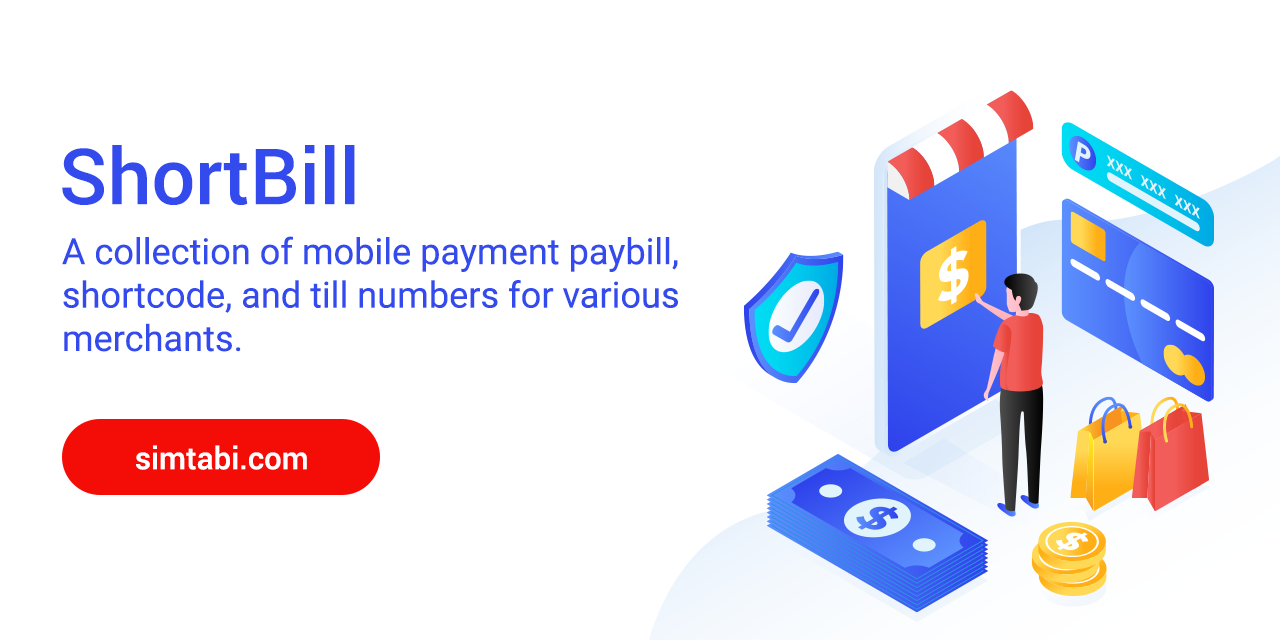
<style>
.page{position:relative;width:1280px;height:640px;background:#ffffff}
.page>*{position:absolute;margin:0}
.t1{font:77.5px "Roboto-Medium";color:#334bed}
.t2{font:36.2px "Roboto-Regular";color:#334bed}
.t3{font:31px "Roboto-Medium";color:#ffffff}
</style>
<div class="page">
<p class="t1" style="left:62px;top:145px;width:293px;height:60px">ShortBill</p>
<p class="t2" style="left:62px;top:236px;width:616px;height:116px">A collection of mobile payment paybill, <br>shortcode, and till numbers for various <br>merchants.</p>
<p class="t3" style="left:136px;top:445px;width:171px;height:25px">simtabi.com</p>
</div>
